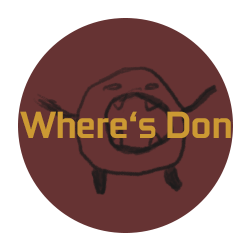
<style>
.page{position:relative;width:250px;height:250px;background:#663333}
.page>*{position:absolute;margin:0}
.t1{font:9.2px "GeForce-Bold";color:#cc9933}
</style>
<div class="page">
<p class="t1" style="left:20px;top:111px;width:211px;height:27px">Where‘s Don</p>
</div>
